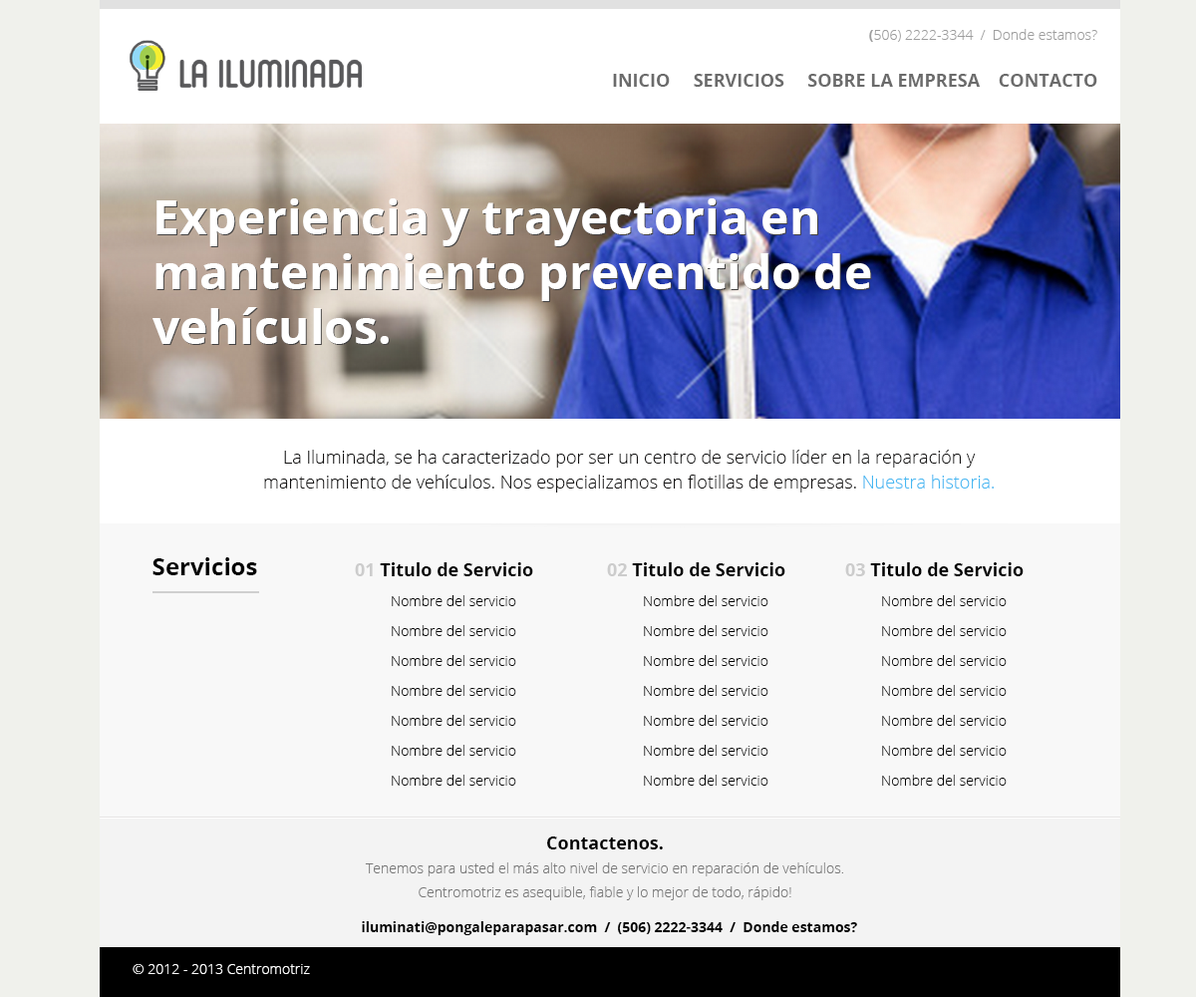
<style>
.page{position:relative;width:1196px;height:997px;background:#f8f8f8}
.page>*{position:absolute;margin:0}
.t1{font:14px "OpenSans-Light";color:#9e9e9e}
.t2{font:14px "OpenSans-Bold";color:#9e9e9e}
.t3{font:17.9px "OpenSans-Bold";color:#6b6b6b;text-transform:uppercase}
.t4{font:47.8px/54.8px "OpenSans-Bold";color:#ffffff}
.t5{font:17.9px/24.5px "OpenSans-Light";color:#131212}
.t6{font:17.9px/24.5px "OpenSans-Light";color:#47b8f2}
.t7{font:23.9px "OpenSans-Bold";color:#000000}
.t8{font:14px/29.9px "OpenSans-Light";color:#000000}
.t9{font:17.9px/24.5px "OpenSans-Bold";color:#cccccc}
.t10{font:17.9px/24.5px "OpenSans-Bold";color:#000000}
.t11{font:14px/23.9px "OpenSans-Light";color:#777777}
.t12{font:17.9px/54.8px "OpenSans-Bold";color:#000000}
.t13{font:14px "OpenSans-Bold";color:#000000}
.t14{font:14px "OpenSans-Light";color:#ffffff}
</style>
<div class="page">
<p class="t1" style="left:869px;top:29px;width:229px;height:13px"><span class="t2">(</span>506) 2222-3344  /  Donde estamos?</p>
<p class="t3" style="left:613px;top:74px;width:485px;height:13px">Inicio     Servicios     Sobre la empresa    Contacto</p>
<p class="t4" style="left:153px;top:198px;width:718px;height:146px">Experiencia y trayectoria en mantenimiento preventido de vehículos.</p>
<p class="t4" style="left:154px;top:199px;width:718px;height:146px">Experiencia y trayectoria en mantenimiento preventido de vehículos.</p>
<p class="t5" style="left:264px;top:450px;width:730px;height:42px;text-align:center">La Iluminada, se ha caracterizado por ser un centro de servicio líder en la reparación y <br>mantenimiento de vehículos. Nos especializamos en flotillas de empresas. <span class="t6">Nuestra historia.</span></p>
<p class="t7" style="left:153px;top:557px;width:104px;height:18px">Servicios</p>
<p class="t8" style="left:355px;top:562px;width:178px;height:224px"><span class="t9">01 </span><span class="t10">Titulo de Servicio<br></span>  Nombre del servicio<br> Nombre del servicio<br> Nombre del servicio <br> Nombre del servicio<br> Nombre del servicio<br> Nombre del servicio<br> Nombre del servicio</p>
<p class="t8" style="left:607px;top:562px;width:179px;height:224px"><span class="t9">02 </span><span class="t10">Titulo de Servicio<br></span>  Nombre del servicio<br> Nombre del servicio<br> Nombre del servicio <br> Nombre del servicio<br> Nombre del servicio<br> Nombre del servicio<br> Nombre del servicio</p>
<p class="t8" style="left:845px;top:562px;width:179px;height:224px"><span class="t9">03 </span><span class="t10">Titulo de Servicio<br></span>  Nombre del servicio<br> Nombre del servicio<br> Nombre del servicio <br> Nombre del servicio<br> Nombre del servicio<br> Nombre del servicio<br> Nombre del servicio</p>
<p class="t11" style="left:365px;top:836px;width:478px;height:64px;text-align:center"><span class="t12">Contactenos.<br></span>Tenemos para usted el más alto nivel de servicio en reparación de vehículos. <br>Centromotriz es asequible, fiable y lo mejor de todo, rápido!</p>
<p class="t13" style="left:362px;top:921px;width:495px;height:14px">iluminati@pongaleparapasar.com  /  (506) 2222-3344  /  Donde estamos?</p>
<p class="t14" style="left:133px;top:964px;width:177px;height:10px">© 2012 - 2013 Centromotriz</p>
</div>
